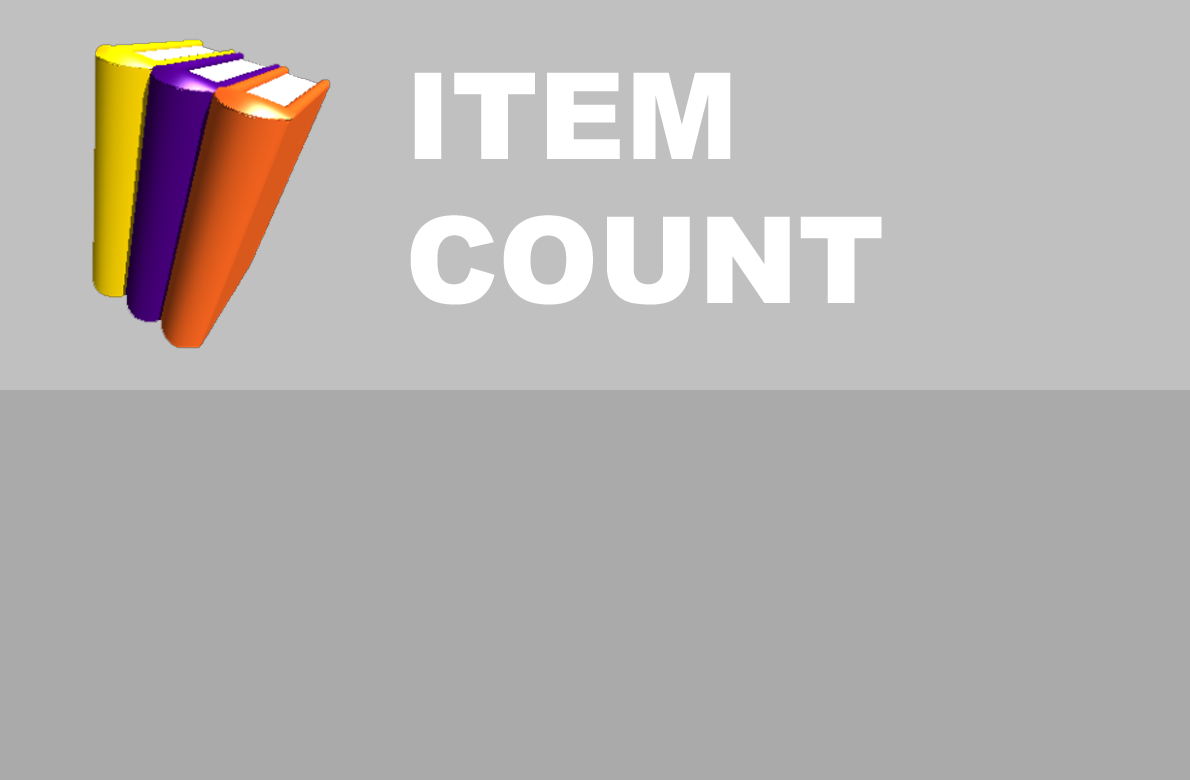
<style>
.page{position:relative;width:1190px;height:780px;background:#aaaaaa}
.page>*{position:absolute;margin:0}
.t1{font:120px "Arial-Black";color:#ffffff}
</style>
<div class="page">
<p class="t1" style="left:410px;top:72px;width:472px;height:233px">ITEM<br>COUNT</p>
</div>
